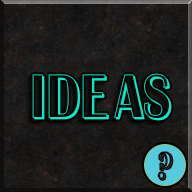
<style>
.page{position:relative;width:192px;height:192px}
.page>*{position:absolute;margin:0}
.t1{font:60px "AAlbionicTitulNrSh";color:#01ecc8}
.t2{font:36px "AAlbionicTitulNrSh";color:#2a2323}
</style>
<div class="page">
<p class="t1" style="left:32px;top:73px;width:140px;height:48px">Ideas</p>
<p class="t2" style="left:158px;top:152px;width:15px;height:28px">?</p>
</div>
